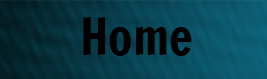
<style>
.page{position:relative;width:267px;height:79px}
.page>*{position:absolute;margin:0}
.t1{font:50px "FrancoisOne-Regular";color:#000000}
</style>
<div class="page">
<p class="t1" style="left:83px;top:17px;width:109px;height:39px">Home</p>
</div>
